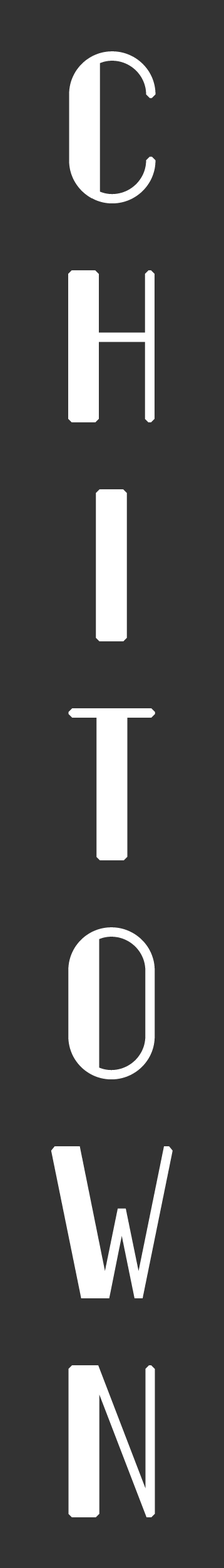
<style>
.page{position:relative;width:224px;height:1568px;background:#333333}
.page>*{position:absolute;margin:0}
.t1{font:262.8px/219px "FiftyFive";letter-spacing:-0.01em;color:#ffffff;font-weight:bold}
</style>
<div class="page">
<p class="t1" style="left:51px;top:51px;width:122px;height:1466px;text-align:center">C<br>H<br>I<br>T<br>O<br>W<br>N</p>
</div>
